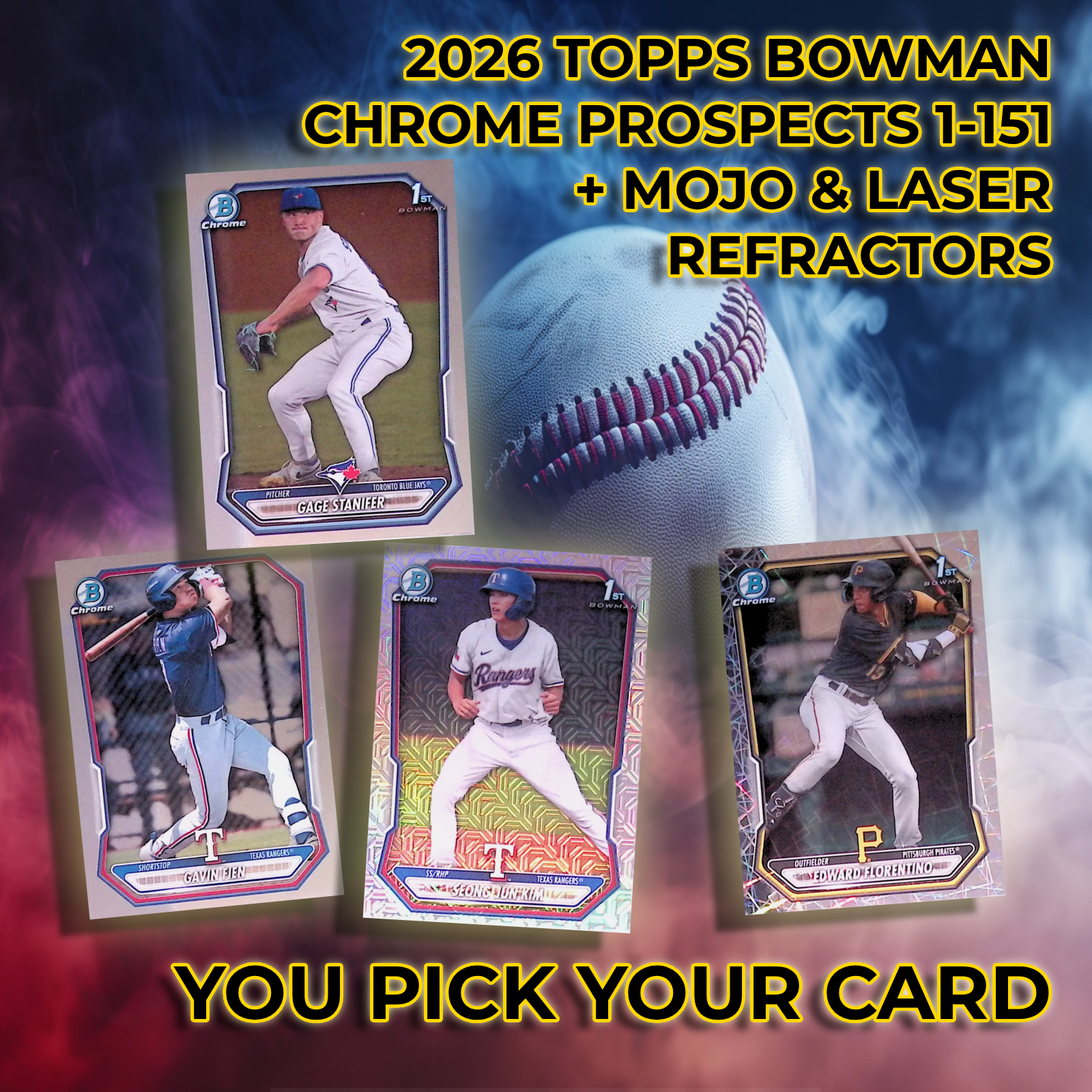
<style>
.page{position:relative;width:1092px;height:1092px}
.page>*{position:absolute;margin:0}
.t1{font:54.7px "Montserrat-Bold";color:#000000}
.t2{font:75.2px "Montserrat-Bold";color:#000000}
</style>
<div class="page">
<p class="t1" style="left:305px;top:38px;width:745px;height:237px;text-align:right">2026 TOPPS BOWMAN<br>CHROME PROSPECTS 1-151<br>+ MOJO &amp; LASER REFRACTORS</p>
<p class="t2" style="left:173px;top:965px;width:876px;height:55px">YOU PICK YOUR CARD</p>
</div>
